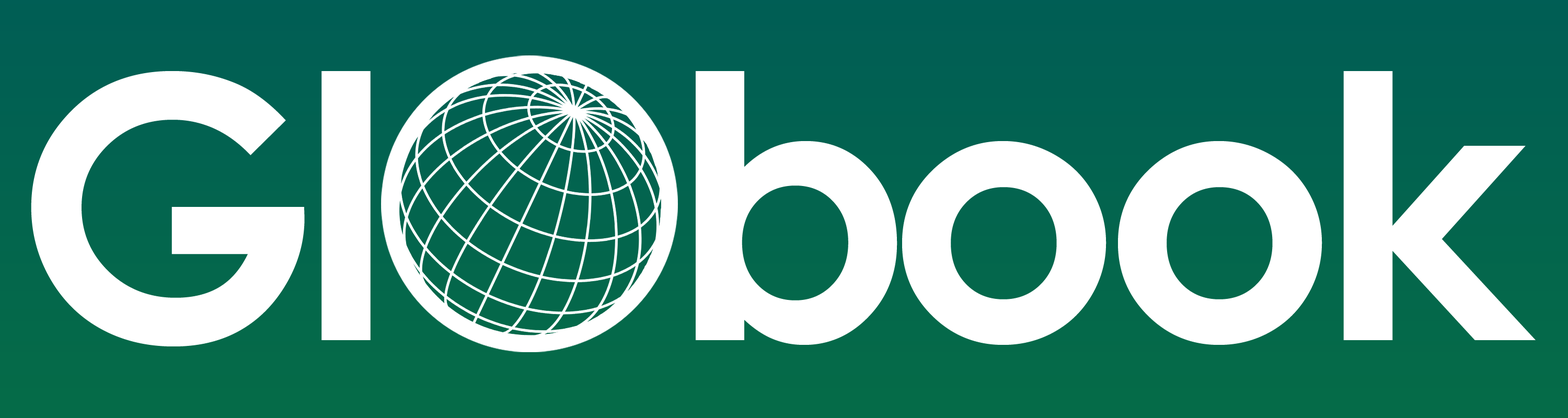
<style>
.page{position:relative;width:1568px;height:418px;background:#ffffff}
.page>*{position:absolute;margin:0}
.t1{font:365.9px "CenturyGothic-Bold";letter-spacing:-0.07em;color:#ffffff}
.t2{font:365.9px "CenturyGothic-Bold";letter-spacing:-0.05em;color:#ffffff}
</style>
<div class="page">
<p class="t1" style="left:31px;top:71px;width:1505px;height:276px"><span class="t2">G</span>l    b<span class="t2">ook</span></p>
</div>
